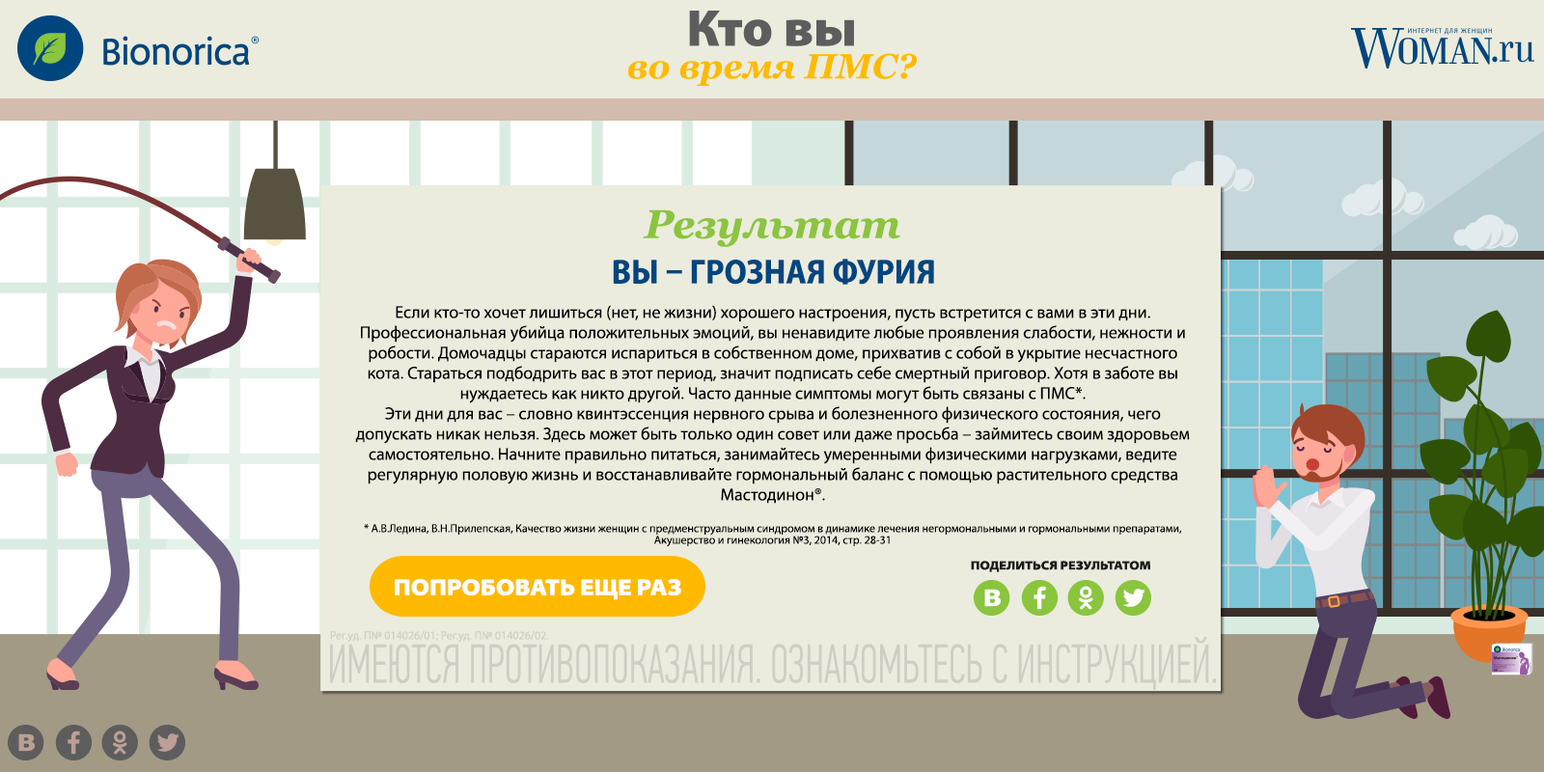
<style>
.page{position:relative;width:1544px;height:772px;background:#ececde}
.page>*{position:absolute;margin:0}
.t1{font:40px "Georgia-BoldItalic";color:#8bc53f}
.t2{font:34.7px "MyriadPro-BoldSemiCn";color:#00467f;text-transform:uppercase}
.t3{font:17.4px/20.3px "MyriadPro-Regular";color:#000000}
.t4{font:11.6px/11.6px "MyriadPro-Regular";color:#000000}
.t5{font:12.4px "MyriadPro-BlackSemiExt";color:#1d1d1b;text-transform:uppercase}
.t6{font:23.2px "MyriadPro-BlackSemiExt";color:#ffffff;text-transform:uppercase}
.t7{font:11.6px "MyriadPro-Regular";color:#cecec4}
</style>
<div class="page">
<p class="t1" style="left:643px;top:209px;width:258px;height:38px">Результат</p>
<p class="t2" style="left:613px;top:259px;width:321px;height:26px">Вы – грозная фурия</p>
<p class="t3" style="left:355px;top:305px;width:835px;height:242px;text-align:center">Если кто-то хочет лишиться (нет, не жизни) хорошего настроения, пусть встретится с вами в эти дни. Профессиональная убийца положительных эмоций, вы ненавидите любые проявления слабости, нежности и робости. Домочадцы стараются испариться в собственном доме, прихватив с собой в укрытие несчастного кота. Стараться подбодрить вас в этот период, значит подписать себе смертный приговор. Хотя в заботе вы нуждаетесь как никто другой. Часто данные симптомы могут быть связаны с ПМС*.<br>Эти дни для вас – словно квинтэссенция нервного срыва и болезненного физического состояния, чего допускать никак нельзя. Здесь может быть только один совет или даже просьба – займитесь своим здоровьем самостоятельно. Начните правильно питаться, занимайтесь умеренными физическими нагрузками, ведите регулярную половую жизнь и восстанавливайте гормональный баланс с помощью растительного средства Мастодинон®.<br> <br><span class="t4">* А.В.Ледина, В.Н.Прилепская, Качество жизни женщин с предменструальным синдромом в динамике лечения негормональными и гормональными препаратами, Акушерство и гинекология №3, 2014, стр. 28-31</span></p>
<p class="t5" style="left:971px;top:561px;width:180px;height:11px">поделиться результатом</p>
<p class="t6" style="left:395px;top:579px;width:286px;height:21px">попробовать еще раз</p>
<p class="t7" style="left:330px;top:631px;width:219px;height:12px">Рег.уд. П№ 014026/01; Рег.уд. П№ 014026/02.</p>
</div>
